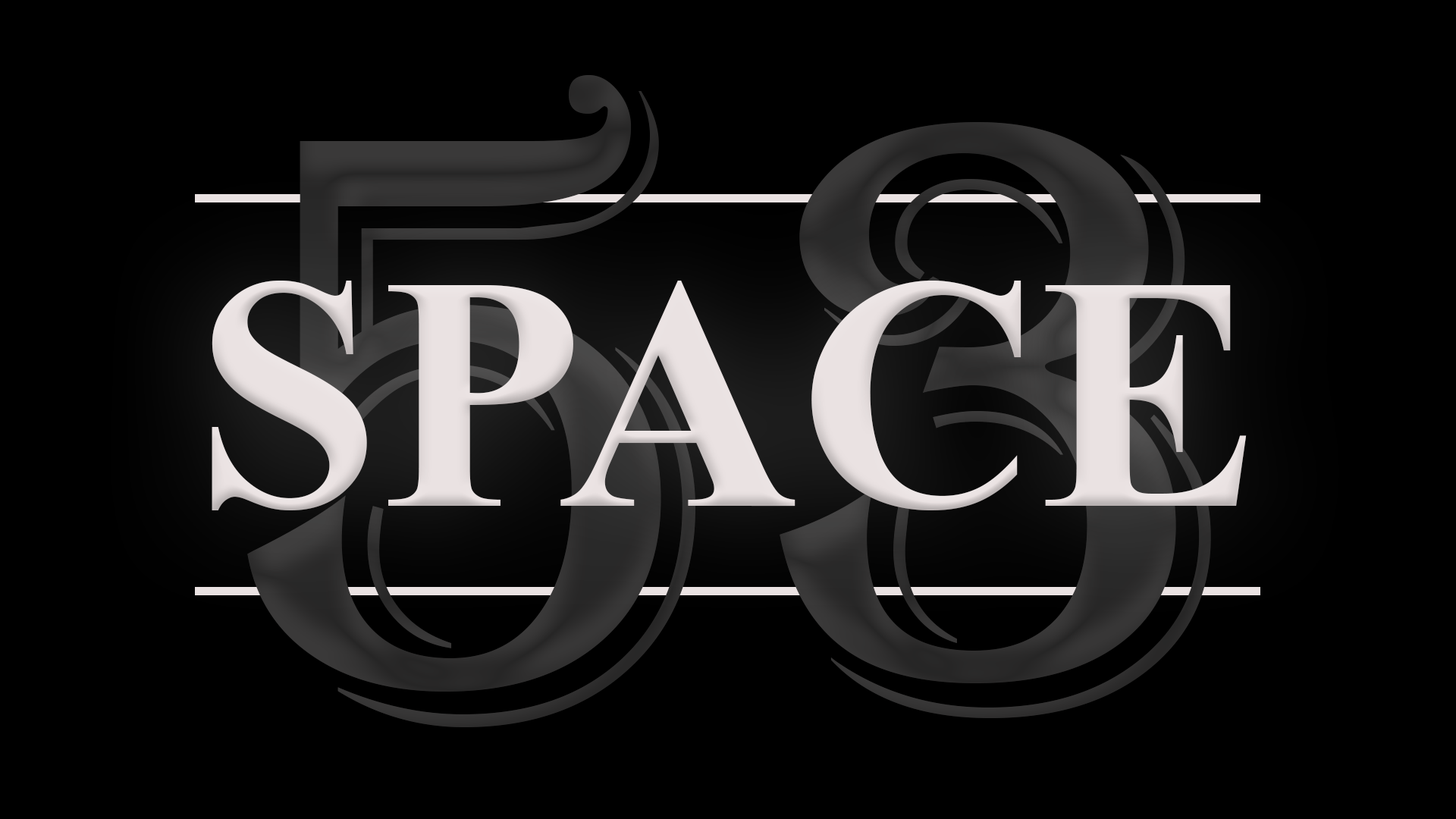
<style>
.page{position:relative;width:1456px;height:819px;background:#000000}
.page>*{position:absolute;margin:0}
.t1{font:332.7px "TimesNewRomanPS-BoldMT";color:#eae2e2}
</style>
<div class="page">
<p class="t1" style="left:212px;top:281px;width:1035px;height:229px">SPACE</p>
</div>
